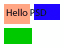
<style>
.page{position:relative;width:64px;height:48px;background:#fefffe}
.page>*{position:absolute;margin:0}
.t1{font:10px "MyriadPro-Regular"}
</style>
<div class="page">
<p class="t1" style="left:6px;top:8px;width:41px;height:8px">Hello PSD</p>
</div>
